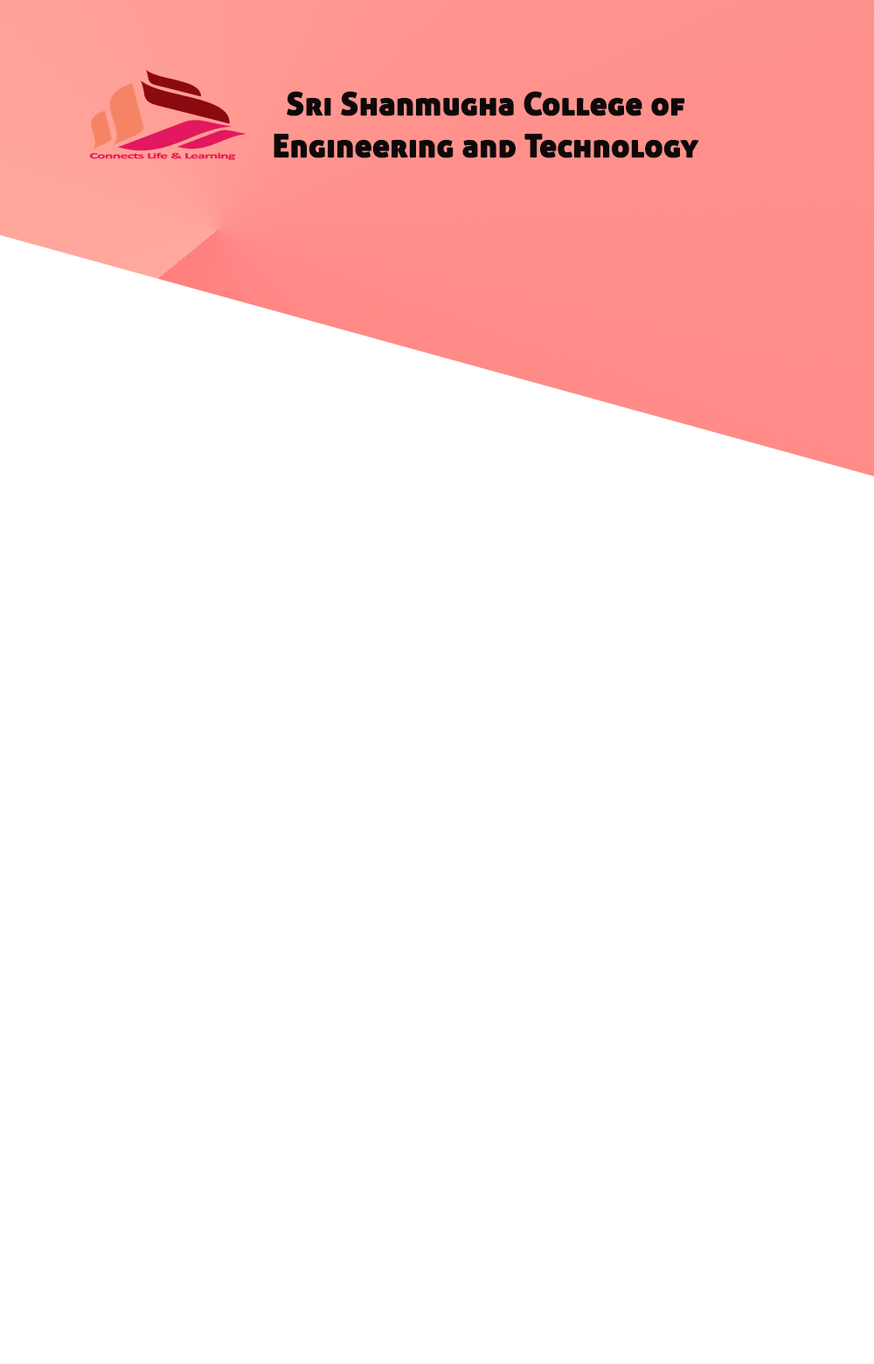
<style>
.page{position:relative;width:874px;height:1364px;background:#ffffff}
.page>*{position:absolute;margin:0}
.t1{font:31.5px/42px "AllerDisplay-Regular";color:#0e0909;font-weight:bold}
</style>
<div class="page">
<p class="t1" style="left:274px;top:91px;width:425px;height:67px;text-align:center">Sri Shanmugha College of <br>Engineering and Technology</p>
</div>
